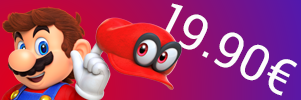
<style>
.page{position:relative;width:301px;height:100px}
.page>*{position:absolute;margin:0}
.t1{font:50px "RobotoSlab-Regular";color:#fcfcfc}
</style>
<div class="page">
<p class="t1" style="left:157px;top:3px;width:141px;height:93px;rotate:27deg">19.90€</p>
</div>
